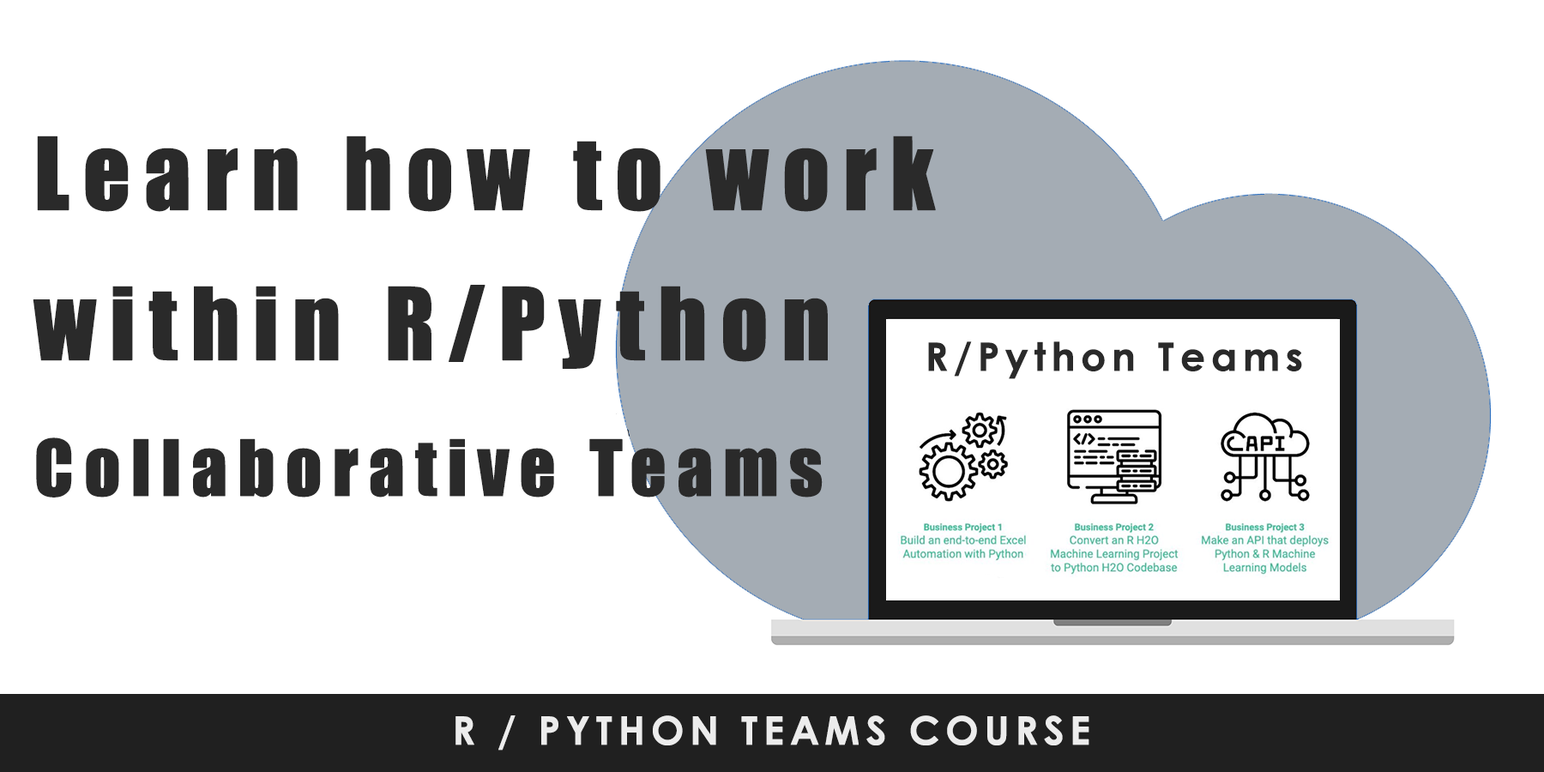
<style>
.page{position:relative;width:1544px;height:772px;background:#ffffff}
.page>*{position:absolute;margin:0}
.t1{font:92.9px/150.1px "Impact";letter-spacing:0.12em;color:#2a2a2a;font-weight:bold}
.t2{font:71.5px/135.8px "Impact";letter-spacing:0.12em;color:#2a2a2a;font-weight:bold}
.t3{font:39.3px "CenturyGothic-Bold";letter-spacing:0.12em;color:#2a2a2a;font-weight:bold}
.t4{font:39.3px "CenturyGothic-Bold";letter-spacing:0.12em;color:#ececec;font-weight:bold}
</style>
<div class="page">
<p class="t1" style="left:33px;top:136px;width:903px;height:362px">Learn how to work <br>within R/Python <br><span class="t2">Collaborative Teams</span></p>
<p class="t3" style="left:928px;top:341px;width:374px;height:38px">R/Python Teams</p>
<p class="t4" style="left:456px;top:716px;width:634px;height:35px">R / PYTHON TEAMS COURSE</p>
</div>
